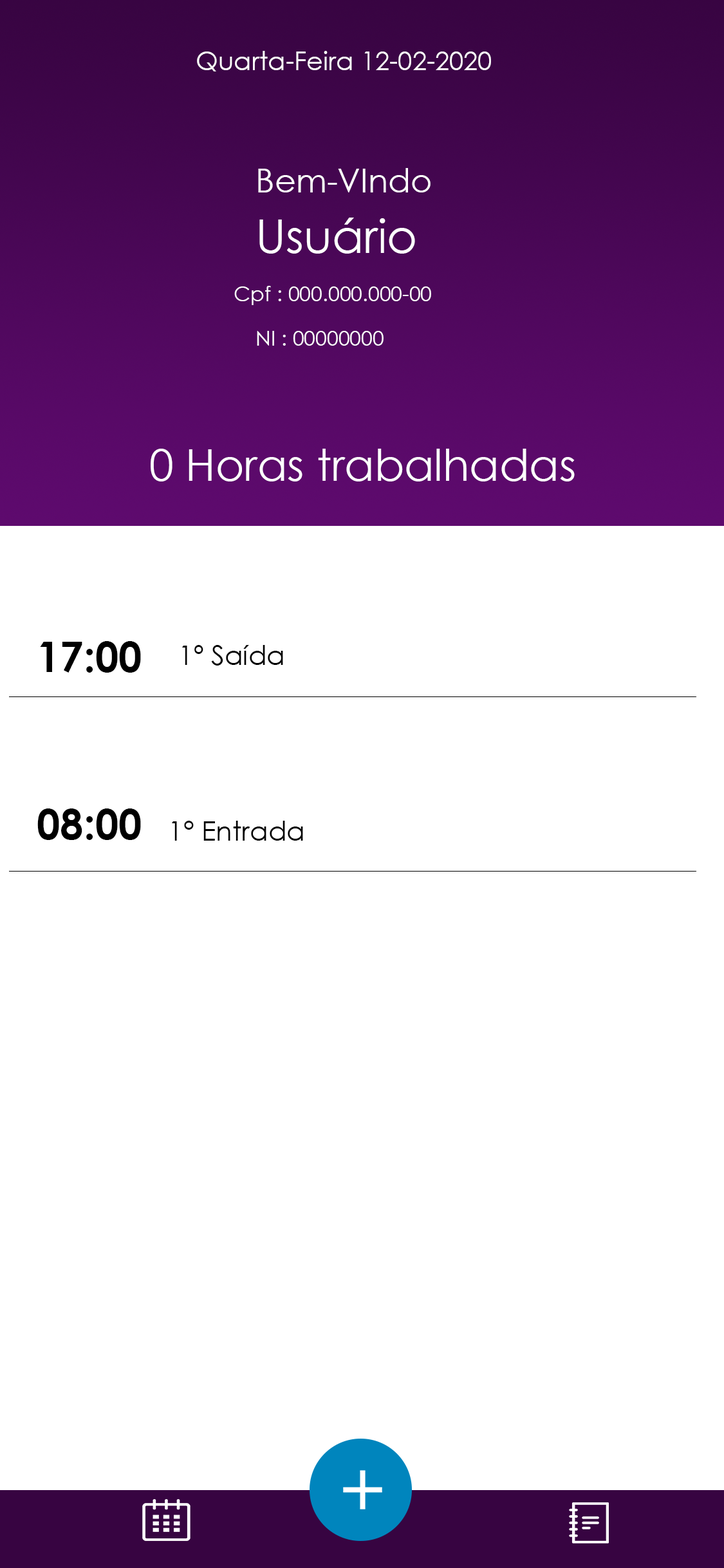
<style>
.page{position:relative;width:724px;height:1568px;background:#ffffff}
.page>*{position:absolute;margin:0}
.t1{font:25.7px "CenturyGothic";color:#ffffff}
.t2{font:32.8px "CenturyGothic";color:#ffffff}
.t3{font:46.3px "CenturyGothic";color:#ffffff}
.t4{font:20.6px "CenturyGothic";color:#ffffff}
.t5{font:43.8px "CenturyGothic";color:#ffffff}
.t6{font:41.8px "CenturyGothic-Bold";color:#000000}
.t7{font:27px "CenturyGothic";color:#000000}
</style>
<div class="page">
<p class="t1" style="left:197px;top:51px;width:294px;height:20px">Quarta-Feira 12-02-2020</p>
<p class="t2" style="left:258px;top:168px;width:173px;height:24px">Bem-VIndo</p>
<p class="t3" style="left:259px;top:218px;width:156px;height:36px">Usuário</p>
<p class="t4" style="left:234px;top:286px;width:197px;height:19px">Cpf : 000.000.000-00</p>
<p class="t4" style="left:257px;top:331px;width:127px;height:15px">NI : 00000000</p>
<p class="t5" style="left:151px;top:449px;width:424px;height:32px">0 Horas trabalhadas</p>
<p class="t6" style="left:40px;top:641px;width:101px;height:32px">17:00</p>
<p class="t7" style="left:182px;top:645px;width:101px;height:21px">1º Saída</p>
<p class="t6" style="left:37px;top:808px;width:104px;height:32px">08:00</p>
<p class="t7" style="left:172px;top:821px;width:131px;height:20px">1° Entrada</p>
</div>
